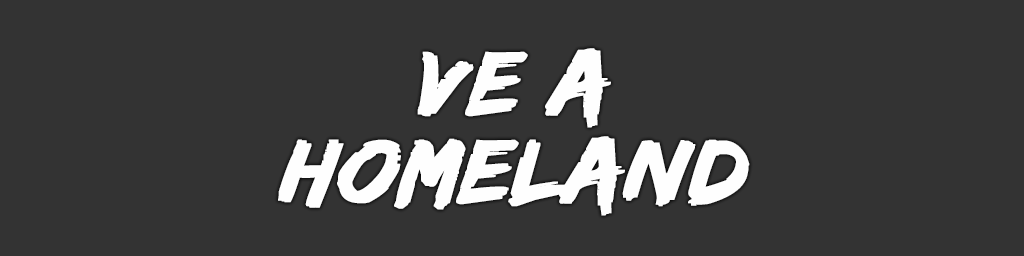
<style>
.page{position:relative;width:1024px;height:256px;background:#333333}
.page>*{position:absolute;margin:0}
.t1{font:94px/88px "EdoSZ";color:#fefefe;font-weight:bold;font-style:italic;scale:1.04 1}
</style>
<div class="page">
<p class="t1" style="left:278px;top:48px;width:472px;height:168px;text-align:center">ve a<br>homeland</p>
</div>
